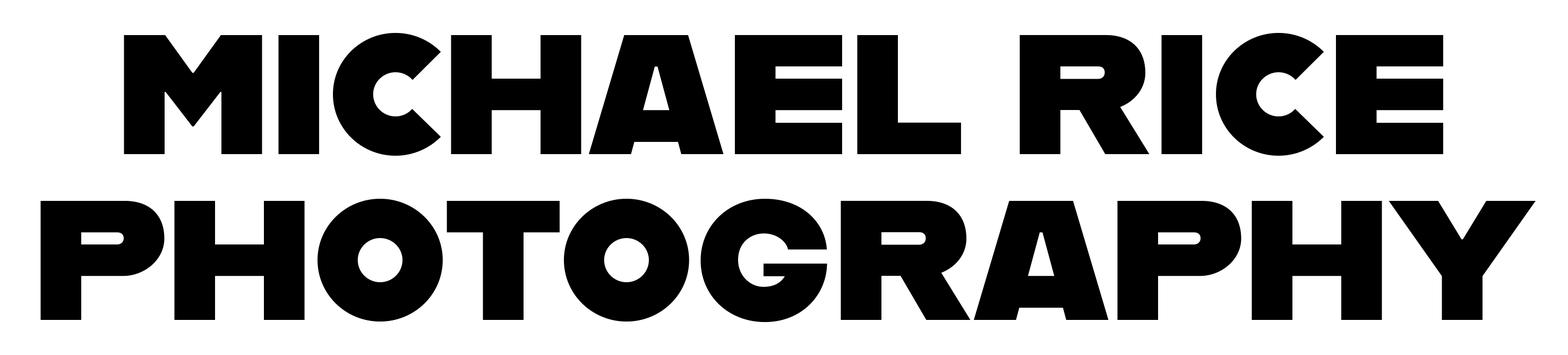
<style>
.page{position:relative;width:1568px;height:355px;background:#ffffff}
.page>*{position:absolute;margin:0}
.t1{font:169.9px/165.2px "Alfarn";color:#000000}
</style>
<div class="page">
<p class="t1" style="left:40px;top:33px;width:1496px;height:289px;text-align:center">MICHAEL RICE<br>PHOTOGRAPHY</p>
</div>
